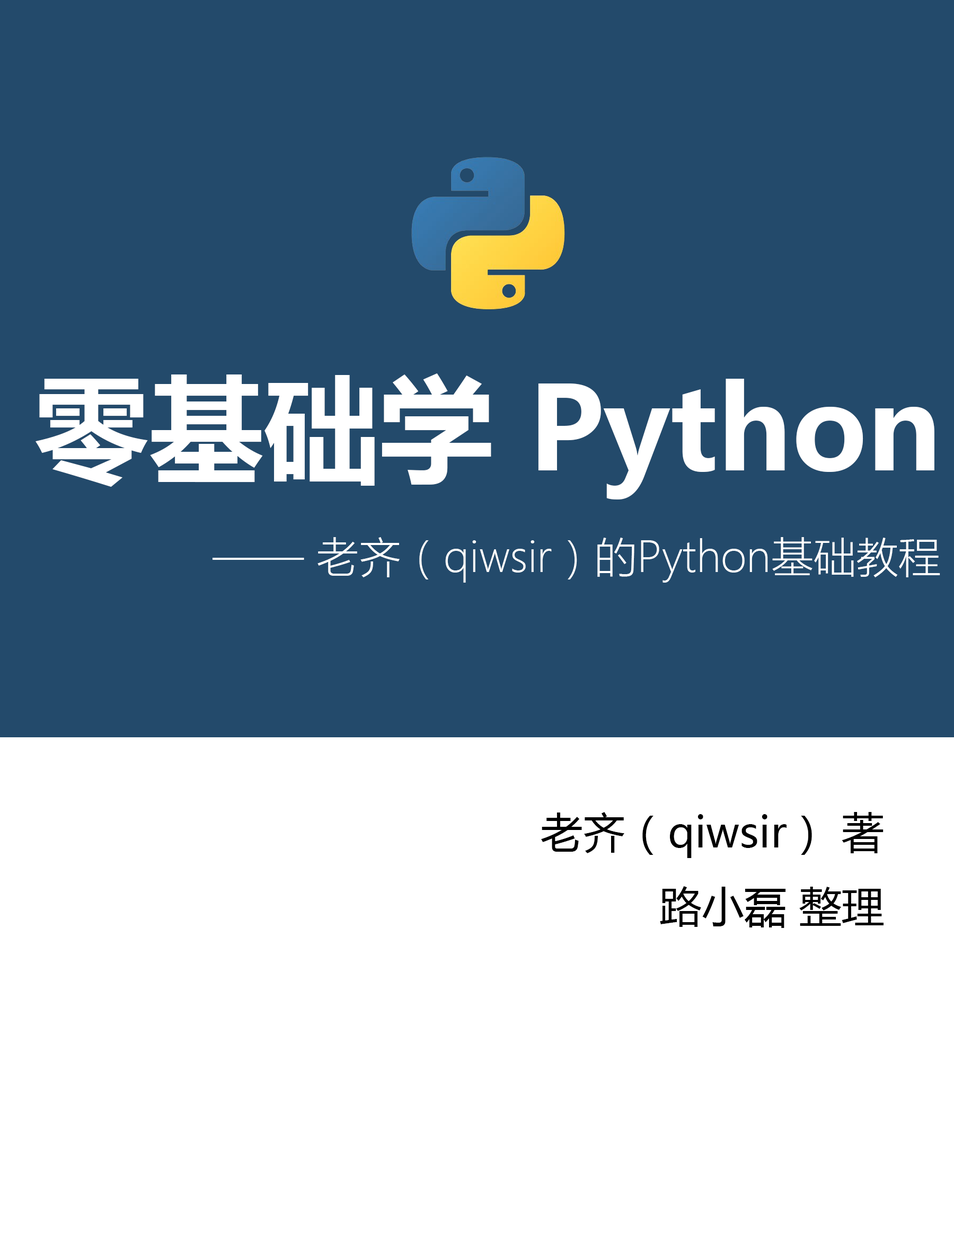
<style>
.page{position:relative;width:954px;height:1250px;background:#234a6b}
.page>*{position:absolute;margin:0}
.t1{font:115px "MicrosoftYaHei-Bold";color:#ffffff}
.t2{font:42.4px "MicrosoftYaHeiLight";color:#ffffff}
.t3{font:42.4px "MicrosoftYaHei";color:#000000}
</style>
<div class="page">
<p class="t1" style="left:35px;top:374px;width:899px;height:126px">零基础学 Python</p>
<p class="t2" style="left:212px;top:537px;width:728px;height:46px">—— 老齐（qiwsir）的Python基础教程</p>
<p class="t3" style="left:541px;top:812px;width:342px;height:116px;text-align:right">老齐（qiwsir） 著<br>路小磊 整理</p>
</div>
